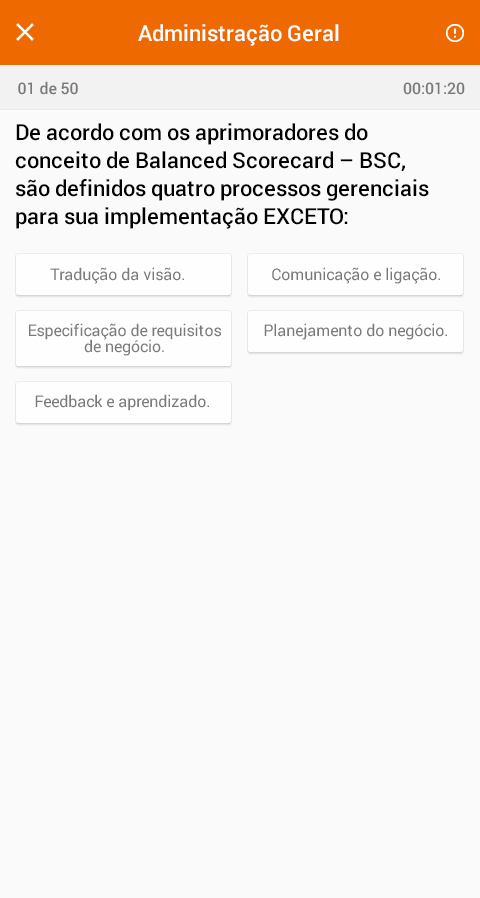
<style>
.page{position:relative;width:480px;height:898px;background:#fafafa}
.page>*{position:absolute;margin:0}
.t1{font:22px "Roboto-Medium";color:#ffffff}
.t2{font:16px "Roboto-Medium";color:#7a7a7a}
.t3{font:22px/28px "Roboto-Medium";color:#000000}
.t4{font:16px "Roboto-Regular";color:#7a7a7a}
.t5{font:16px/16px "Roboto-Regular";color:#7a7a7a}
</style>
<div class="page">
<p class="t1" style="left:138px;top:24px;width:201px;height:22px">Administração Geral</p>
<p class="t2" style="left:18px;top:81px;width:60px;height:14px">01 de 50</p>
<p class="t2" style="left:403px;top:82px;width:62px;height:13px">00:01:20</p>
<p class="t3" style="left:15px;top:123px;width:414px;height:106px">De acordo com os aprimoradores do <br>conceito de Balanced Scorecard – BSC, <br>são definidos quatro processos gerenciais <br>para sua implementação EXCETO:</p>
<p class="t4" style="left:50px;top:267px;width:134px;height:17px">Tradução da visão.</p>
<p class="t4" style="left:272px;top:267px;width:168px;height:17px">Comunicação e ligação.</p>
<p class="t5" style="left:29px;top:323px;width:192px;height:33px;text-align:center">Especificação de requisitos <br>de negócio.</p>
<p class="t4" style="left:264px;top:323px;width:183px;height:17px">Planejamento do negócio.</p>
<p class="t4" style="left:35px;top:394px;width:174px;height:17px">Feedback e aprendizado.</p>
</div>
